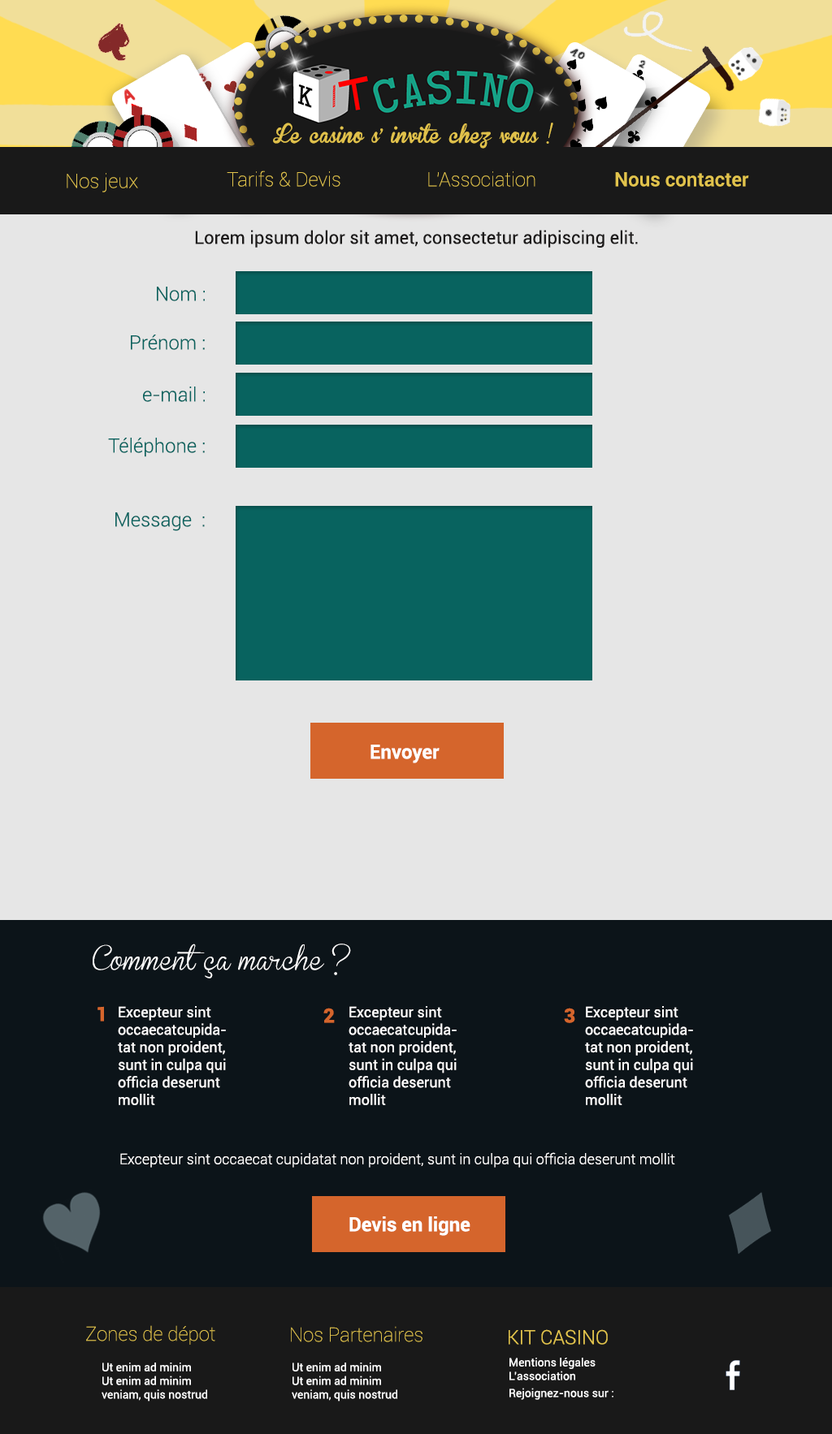
<style>
.page{position:relative;width:832px;height:1434px;background:#e6e6e6}
.page>*{position:absolute;margin:0}
.t1{font:17.9px "BrannbollFet";color:#e0c14b}
.t2{font:19.5px "Roboto-Thin";color:#e1c34c}
.t3{font:19.5px "Roboto-Medium";color:#e1c34c}
.t4{font:17.9px "Roboto-Regular";color:#1d1b1b}
.t5{font:19.5px "Roboto-Light";color:#08635f}
.t6{font:19.5px "Roboto-Bold";color:#ffffff}
.t7{font:24.4px "BrannbollSmal";color:#ffffff}
.t8{font:19.5px "Roboto-Black";color:#d5652c}
.t9{font:14.6px "Roboto-Regular";color:#fffefe}
.t10{font:14.6px "Roboto-Light";color:#fffefe}
.t11{font:19.5px "Roboto-Light";color:#e1c34c}
.t12{font:11.4px "Roboto-Regular";color:#ffffff}
.t13{font:11.4px/17.1px "Roboto-Regular";color:#ffffff}
</style>
<div class="page">
<p class="t1" style="left:273px;top:123px;width:280px;height:26px">Le casino s' invite chez vous !</p>
<p class="t2" style="left:67px;top:173px;width:71px;height:19px">Nos jeux</p>
<p class="t2" style="left:227px;top:171px;width:113px;height:16px">Tarifs &amp; Devis</p>
<p class="t2" style="left:428px;top:171px;width:107px;height:16px">L'Association</p>
<p class="t3" style="left:615px;top:172px;width:134px;height:15px">Nous contacter</p>
<p class="t4" style="left:195px;top:230px;width:442px;height:18px">Lorem ipsum dolor sit amet, consectetur adipiscing elit.</p>
<p class="t5" style="left:157px;top:287px;width:48px;height:14px">Nom :</p>
<p class="t5" style="left:131px;top:335px;width:74px;height:15px">Prénom :</p>
<p class="t5" style="left:143px;top:387px;width:62px;height:15px">e-mail :</p>
<p class="t5" style="left:108px;top:438px;width:97px;height:19px">Téléphone :</p>
<p class="t5" style="left:115px;top:512px;width:90px;height:19px">Message  :</p>
<p class="t6" style="left:370px;top:745px;width:69px;height:18px">Envoyer</p>
<p class="t7" style="left:93px;top:944px;width:258px;height:34px">Comment ça marche ?</p>
<p class="t8" style="left:97px;top:1006px;width:7px;height:16px">1</p>
<p class="t9" style="left:118px;top:1006px;width:108px;height:99px">Excepteur sint occaecat cupidatat non proident, sunt in culpa qui officia deserunt mollit</p>
<p class="t8" style="left:323px;top:1008px;width:12px;height:15px">2</p>
<p class="t9" style="left:348px;top:1006px;width:108px;height:99px">Excepteur sint occaecat cupidatat non proident, sunt in culpa qui officia deserunt mollit</p>
<p class="t8" style="left:564px;top:1008px;width:11px;height:15px">3</p>
<p class="t9" style="left:585px;top:1006px;width:108px;height:99px">Excepteur sint occaecat cupidatat non proident, sunt in culpa qui officia deserunt mollit</p>
<p class="t10" style="left:120px;top:1152px;width:555px;height:16px">Excepteur sint occaecat cupidatat non proident, sunt in culpa qui officia deserunt mollit</p>
<p class="t6" style="left:349px;top:1216px;width:121px;height:20px">Devis en ligne</p>
<p class="t2" style="left:86px;top:1325px;width:129px;height:20px">Zones de dépot</p>
<p class="t2" style="left:291px;top:1326px;width:131px;height:16px">Nos Partenaires</p>
<p class="t11" style="left:508px;top:1329px;width:99px;height:16px">KIT CASINO</p>
<p class="t12" style="left:509px;top:1358px;width:104px;height:42px">Mentions légales<br>L’association<br><span class="t13">Rejoignez-nous sur :</span></p>
<p class="t12" style="left:102px;top:1363px;width:105px;height:39px">Ut enim ad minim <br>Ut enim ad minim <br>veniam, quis nostrud</p>
<p class="t12" style="left:292px;top:1363px;width:105px;height:39px">Ut enim ad minim <br>Ut enim ad minim <br>veniam, quis nostrud</p>
</div>
